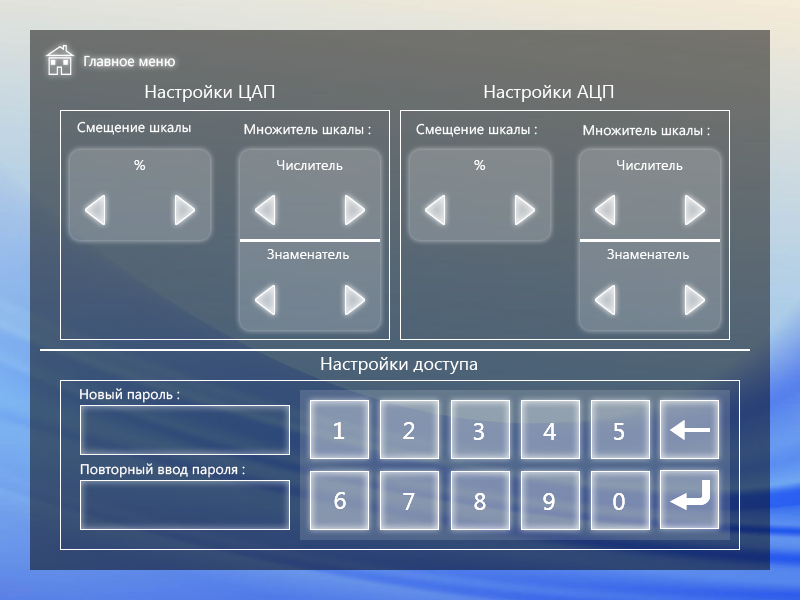
<style>
.page{position:relative;width:800px;height:600px}
.page>*{position:absolute;margin:0}
.t1{font:14.2px "SegoeUI";color:#ffffff}
.t2{font:18px "SegoeUI";color:#ffffff}
.t3{font:14px "SegoeUI";color:#ffffff}
.t4{font:24px "SegoeUI";color:#ffffff}
</style>
<div class="page">
<p class="t1" style="left:84px;top:55px;width:91px;height:12px">Главное меню</p>
<p class="t2" style="left:145px;top:85px;width:130px;height:17px">Настройки ЦАП</p>
<p class="t2" style="left:484px;top:85px;width:130px;height:17px">Настройки АЦП</p>
<p class="t3" style="left:77px;top:121px;width:114px;height:14px">Смещение шкалы</p>
<p class="t3" style="left:244px;top:124px;width:127px;height:11px">Множитель шкалы :</p>
<p class="t3" style="left:416px;top:123px;width:121px;height:14px">Смещение шкалы :</p>
<p class="t3" style="left:583px;top:125px;width:127px;height:11px">Множитель шкалы :</p>
<p class="t3" style="left:134px;top:160px;width:12px;height:10px">%</p>
<p class="t3" style="left:277px;top:160px;width:66px;height:10px">Числитель</p>
<p class="t3" style="left:474px;top:160px;width:12px;height:10px">%</p>
<p class="t3" style="left:617px;top:160px;width:66px;height:10px">Числитель</p>
<p class="t3" style="left:267px;top:249px;width:82px;height:10px">Знаменатель</p>
<p class="t3" style="left:607px;top:249px;width:82px;height:10px">Знаменатель</p>
<p class="t2" style="left:321px;top:357px;width:156px;height:17px">Настройки доступа</p>
<p class="t3" style="left:80px;top:388px;width:100px;height:15px">Новый пароль :</p>
<p class="t4" style="left:334px;top:422px;width:11px;height:17px">1</p>
<p class="t4" style="left:334px;top:422px;width:11px;height:17px">1</p>
<p class="t4" style="left:403px;top:422px;width:11px;height:17px">2</p>
<p class="t4" style="left:403px;top:422px;width:11px;height:17px">2</p>
<p class="t4" style="left:473px;top:423px;width:11px;height:17px">3</p>
<p class="t4" style="left:473px;top:423px;width:11px;height:17px">3</p>
<p class="t4" style="left:543px;top:423px;width:13px;height:17px">4</p>
<p class="t4" style="left:543px;top:423px;width:13px;height:17px">4</p>
<p class="t4" style="left:614px;top:423px;width:10px;height:17px">5</p>
<p class="t4" style="left:614px;top:423px;width:10px;height:17px">5</p>
<p class="t3" style="left:80px;top:463px;width:165px;height:15px">Повторный ввод пароля :</p>
<p class="t4" style="left:334px;top:492px;width:12px;height:17px">6</p>
<p class="t4" style="left:334px;top:492px;width:12px;height:17px">6</p>
<p class="t4" style="left:403px;top:493px;width:12px;height:17px">7</p>
<p class="t4" style="left:403px;top:493px;width:12px;height:17px">7</p>
<p class="t4" style="left:474px;top:493px;width:12px;height:17px">8</p>
<p class="t4" style="left:474px;top:493px;width:12px;height:17px">8</p>
<p class="t4" style="left:543px;top:493px;width:12px;height:17px">9</p>
<p class="t4" style="left:543px;top:493px;width:12px;height:17px">9</p>
<p class="t4" style="left:613px;top:493px;width:12px;height:17px">0</p>
<p class="t4" style="left:613px;top:493px;width:12px;height:17px">0</p>
</div>
